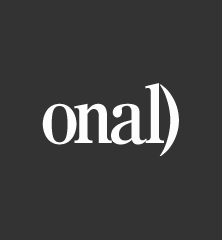
<style>
.page{position:relative;width:222px;height:240px;background:#333333}
.page>*{position:absolute;margin:0}
.t1{font:80px "RyuminPro-ExBold";letter-spacing:-0.08em;color:#fdfdfd;scale:0.9 1}
</style>
<div class="page">
<p class="t1" style="left:42px;top:83px;width:137px;height:73px">onal)</p>
</div>
